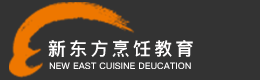
<style>
.page{position:relative;width:260px;height:80px;background:#333333}
.page>*{position:absolute;margin:0}
.t1{font:18px "PingFang-SC-Heavy";letter-spacing:0.18em;color:#fffefe}
.t2{font:9px "PingFang-SC-Heavy";color:#fffefe}
</style>
<div class="page">
<p class="t1" style="left:48px;top:40px;width:145px;height:17px">新东方烹饪教育</p>
<p class="t2" style="left:49px;top:62px;width:142px;height:7px">NEW EAST CUISINE DEUCATION</p>
</div>
